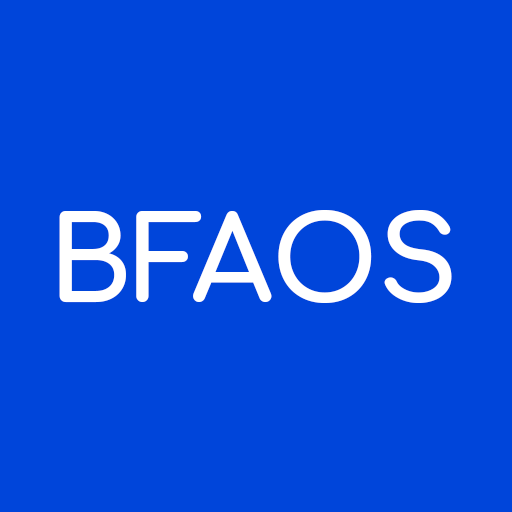
<style>
.page{position:relative;width:512px;height:512px;background:#0045da}
.page>*{position:absolute;margin:0}
.t1{font:116.7px "Comfortaa-Bold";color:#ffffff}
</style>
<div class="page">
<p class="t1" style="left:59px;top:210px;width:393px;height:93px">BFAOS</p>
</div>
